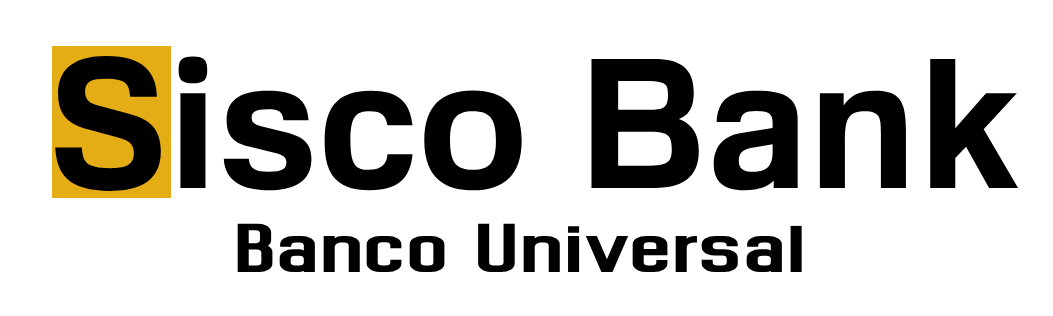
<style>
.page{position:relative;width:1053px;height:316px;background:#ffffff}
.page>*{position:absolute;margin:0}
.t1{font:180px "FamiliarPro-Bold";color:#000000}
.t2{font:100px "Dhurjati";color:#010101}
</style>
<div class="page">
<p class="t1" style="left:55px;top:56px;width:964px;height:135px">Sisco Bank</p>
<p class="t2" style="left:237px;top:223px;width:565px;height:49px">Banco Universal</p>
</div>
